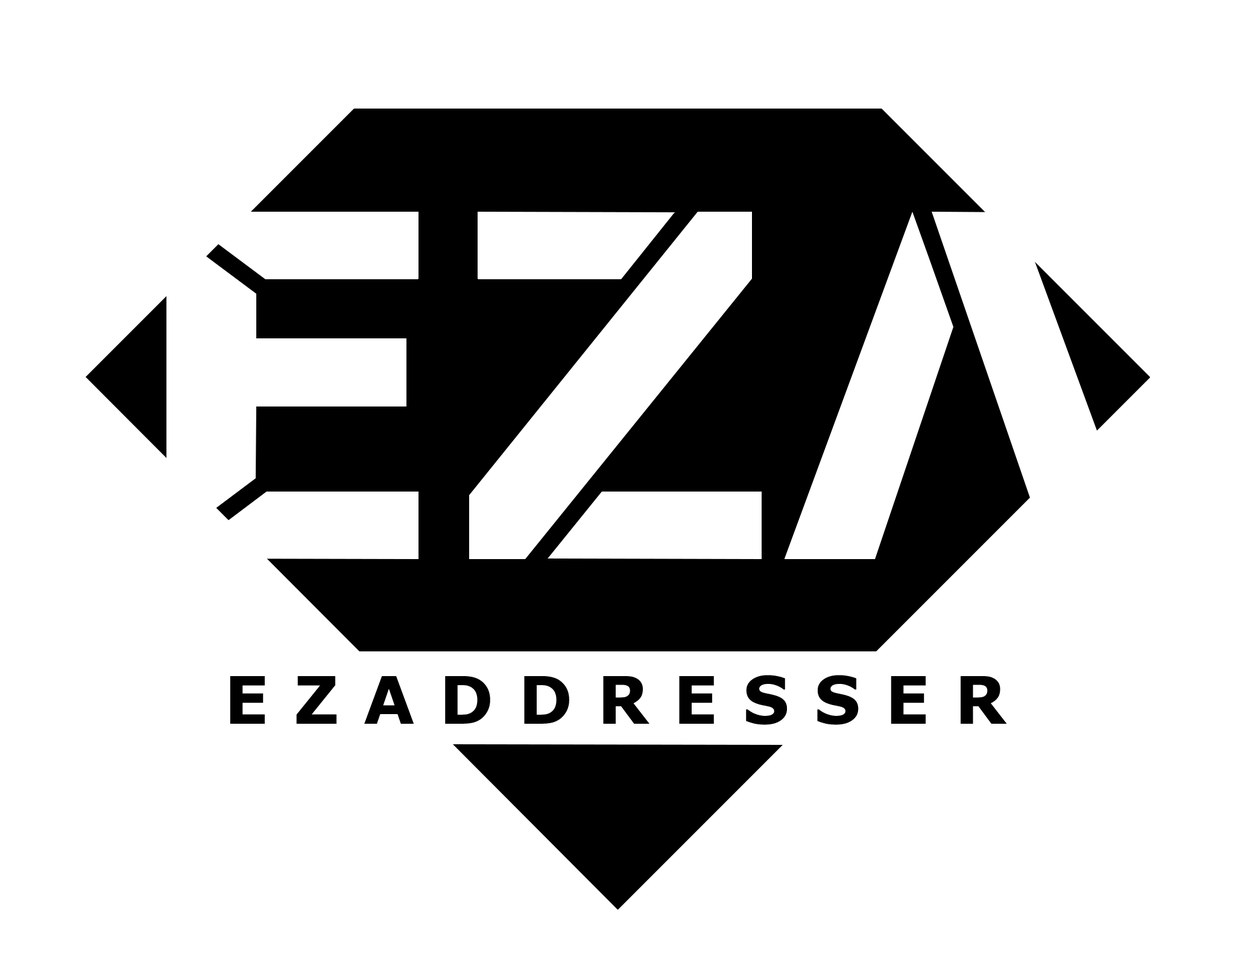
<style>
.page{position:relative;width:1235px;height:965px;background:#ffffff}
.page>*{position:absolute;margin:0}
.t1{font:65.4px "Verdana-Bold";letter-spacing:0.38em;color:#000000}
</style>
<div class="page">
<p class="t1" style="left:230px;top:675px;width:777px;height:50px">EZADDRESSER</p>
</div>
